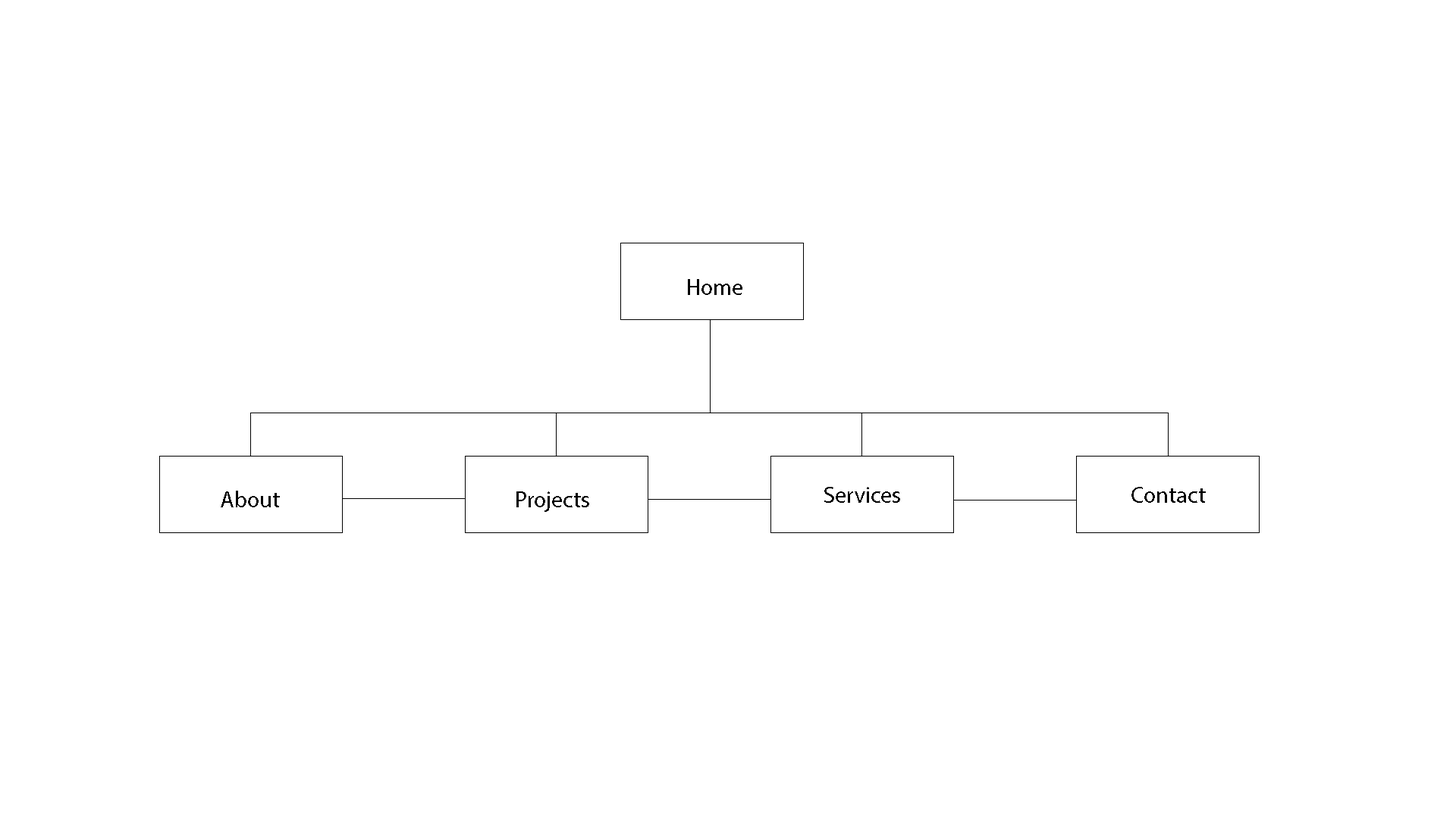
<style>
.page{position:relative;width:1456px;height:819px;background:#ffffff}
.page>*{position:absolute;margin:0}
.t1{font:22.7px "MyriadPro-Regular";color:#000000}
</style>
<div class="page">
<p class="t1" style="left:688px;top:279px;width:54px;height:16px">Home</p>
<p class="t1" style="left:221px;top:491px;width:59px;height:16px">About</p>
<p class="t1" style="left:516px;top:491px;width:73px;height:21px">Projects</p>
<p class="t1" style="left:824px;top:487px;width:76px;height:16px">Services</p>
<p class="t1" style="left:1131px;top:487px;width:75px;height:16px">Contact</p>
</div>
